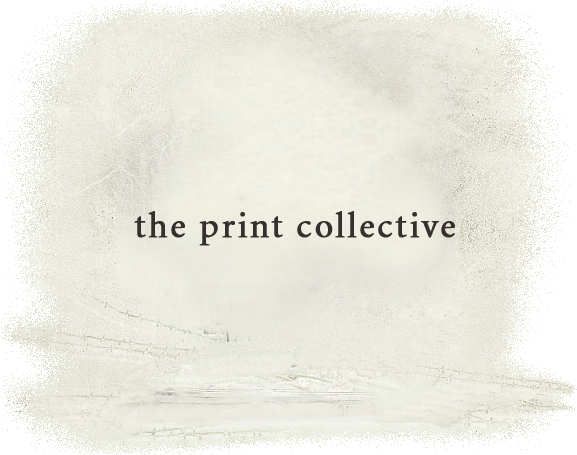
<style>
.page{position:relative;width:577px;height:455px}
.page>*{position:absolute;margin:0}
.t1{font:36px "Minion-Regular";letter-spacing:0.05em;color:#362f2d;font-weight:bold}
</style>
<div class="page">
<p class="t1" style="left:134px;top:211px;width:321px;height:35px">the print collective</p>
</div>
